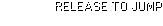
<style>
.page{position:relative;width:163px;height:26px;background:#ffffff}
.page>*{position:absolute;margin:0}
.t1{font:12px "Geneva";color:#000000}
</style>
<div class="page">
<p class="t1" style="left:56px;top:2px;width:106px;height:9px">RELEASE TO JUMP</p>
</div>
